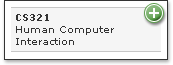
<style>
.page{position:relative;width:173px;height:65px;background:#f5f5f5}
.page>*{position:absolute;margin:0}
.t1{font:10px "Verdana";color:#333333}
.t2{font:10px "Verdana-Bold";color:#333333}
.t3{font:17px "Verdana-BoldItalic";color:#ffffff}
</style>
<div class="page">
<p class="t1" style="left:16px;top:14px;width:98px;height:31px"><span class="t2">CS321<br></span>Human Computer<br>Interaction</p>
<p class="t3" style="left:149px;top:8px;width:10px;height:10px">+</p>
</div>
